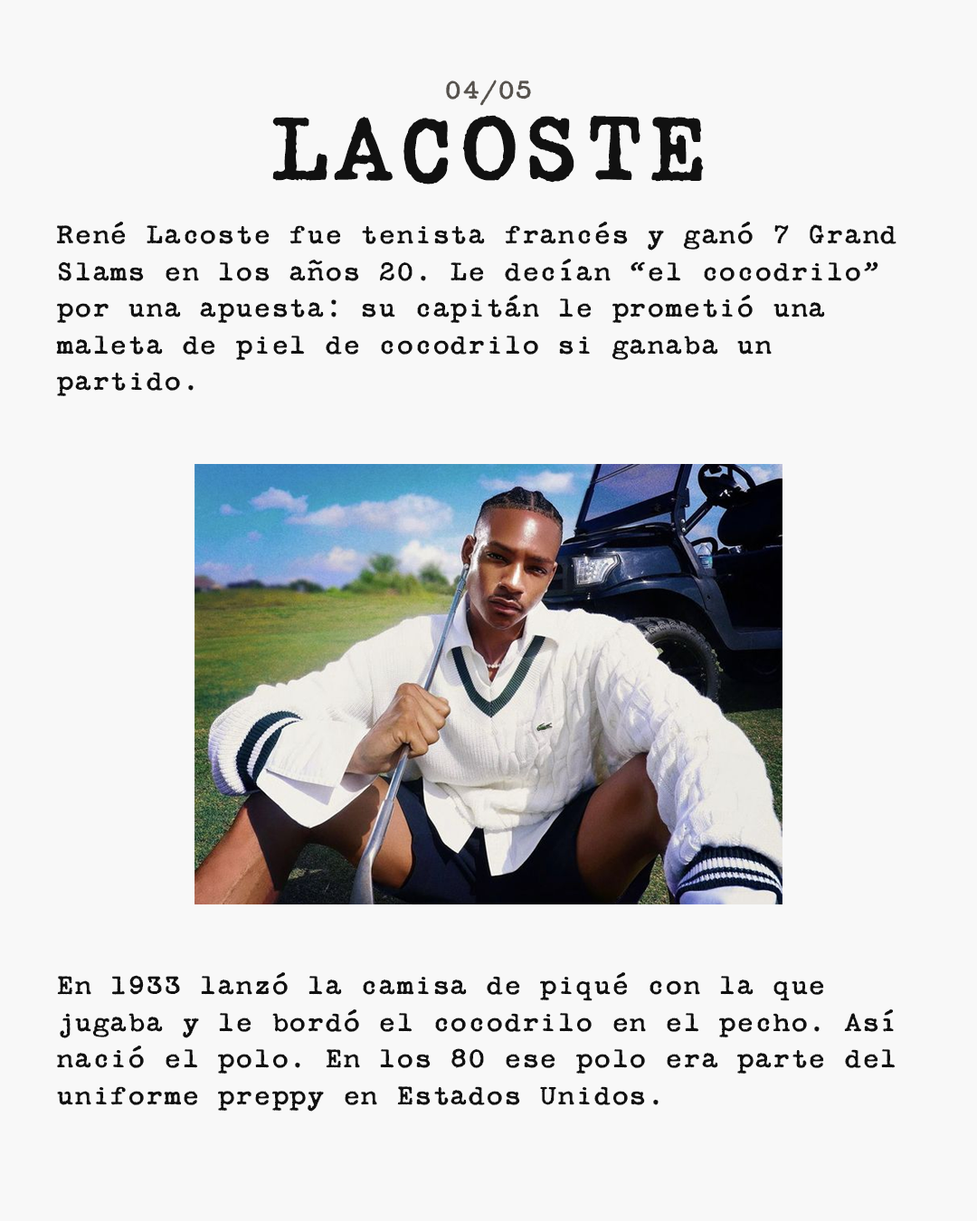
<style>
.page{position:relative;width:977px;height:1221px;background:#f8f8f8}
.page>*{position:absolute;margin:0}
.t1{font:30.1px "SecretServiceTypewriterRR-Regular";color:#57534e}
.t2{font:107.3px "SecretServiceTypewriterRR-Regular";color:#111111}
.t3{font:30.5px "SecretServiceTypewriterRR-Regular";color:#111111}
</style>
<div class="page">
<p class="t1" style="left:446px;top:80px;width:85px;height:26px">04/05</p>
<p class="t2" style="left:272px;top:115px;width:432px;height:69px">LACOSTE</p>
<p class="t3" style="left:56px;top:222px;width:840px;height:174px">René Lacoste fue tenista francés y ganó 7 Grand Slams en los años 20. Le decían “el cocodrilo” por una apuesta: su capitán le prometió una maleta de piel de cocodrilo si ganaba un partido.</p>
<p class="t3" style="left:57px;top:972px;width:838px;height:139px">En 1933 lanzó la camisa de piqué con la que jugaba y le bordó el cocodrilo en el pecho. Así nació el polo. En los 80 ese polo era parte del uniforme preppy en Estados Unidos.</p>
</div>
